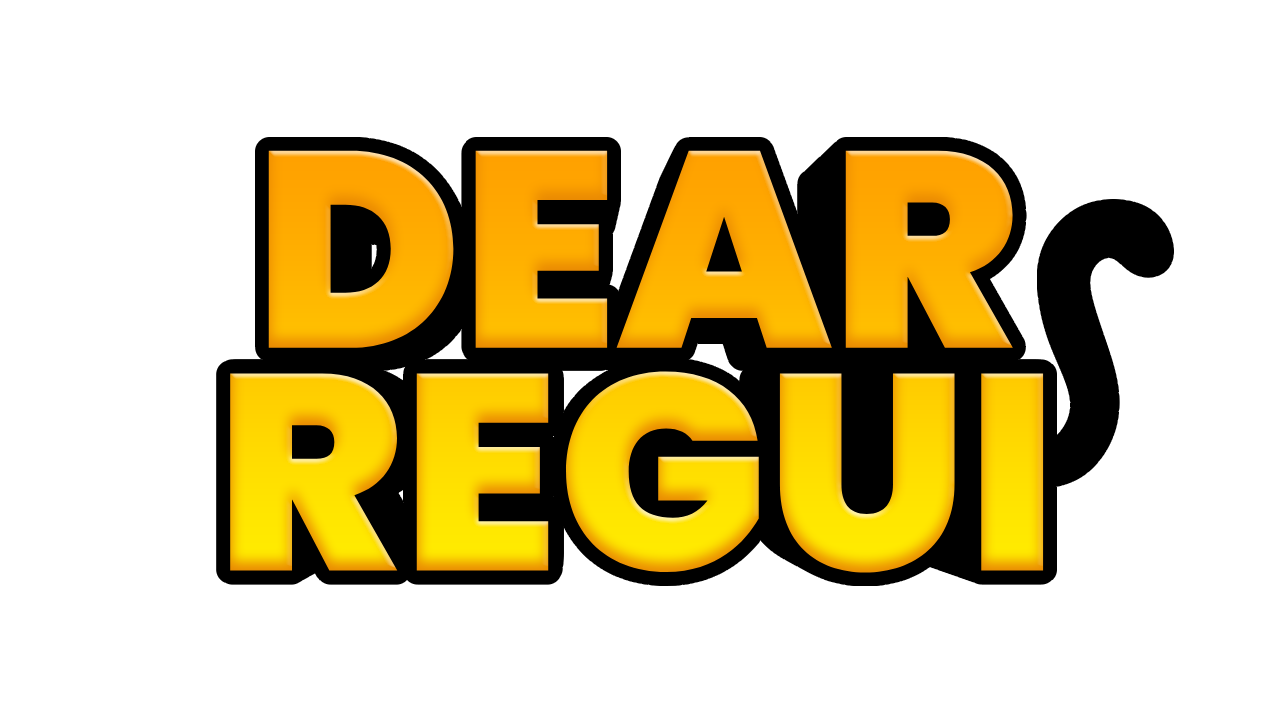
<style>
.page{position:relative;width:1280px;height:720px;background:#ffffff}
.page>*{position:absolute;margin:0}
.t1{font:278.5px "Poppins-Black"}
</style>
<div class="page">
<p class="t1" style="left:230px;top:150px;width:814px;height:423px;text-align:center">DEAR<br>REGUI</p>
</div>
